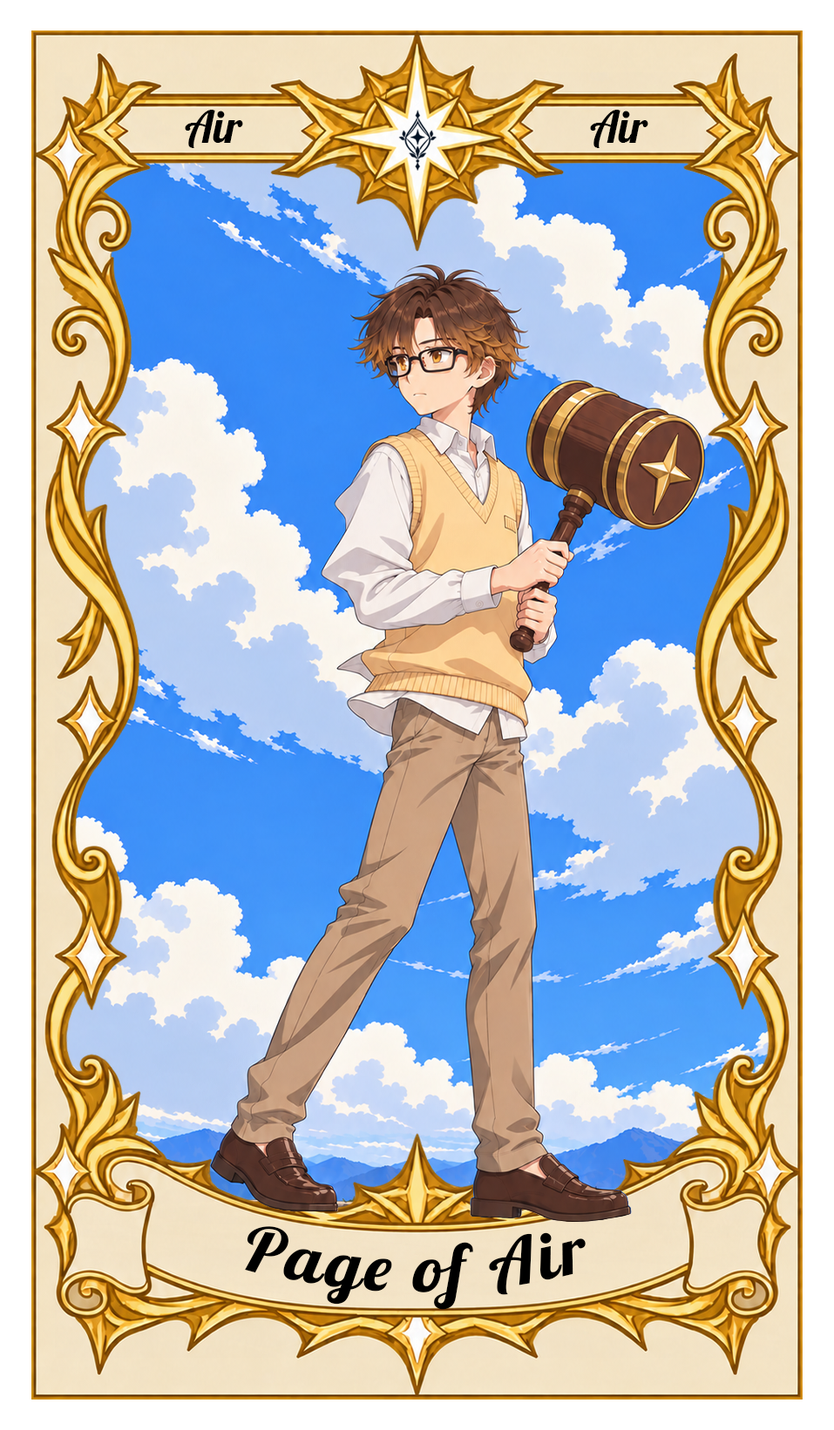
<style>
.page{position:relative;width:834px;height:1430px}
.page>*{position:absolute;margin:0}
.t1{font:43.6px "Lobster-Regular";color:#000000}
.t2{font:65.3px "Lobster-Regular";letter-spacing:0.05em;color:#000000}
</style>
<div class="page">
<p class="t1" style="left:185px;top:110px;width:58px;height:38px">Air</p>
<p class="t1" style="left:590px;top:110px;width:58px;height:38px">Air</p>
<p class="t2" style="left:245px;top:1227px;width:340px;height:83px">Page of Air</p>
</div>
